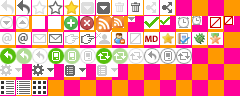
<style>
.page{position:relative;width:240px;height:96px;background:#ffffff}
.page>*{position:absolute;margin:0}
.t1{font:9px "MyriadPro-Bold";color:#aa0000}
</style>
<div class="page">
<p class="t1" style="left:145px;top:35px;width:13px;height:7px">MD</p>
</div>
